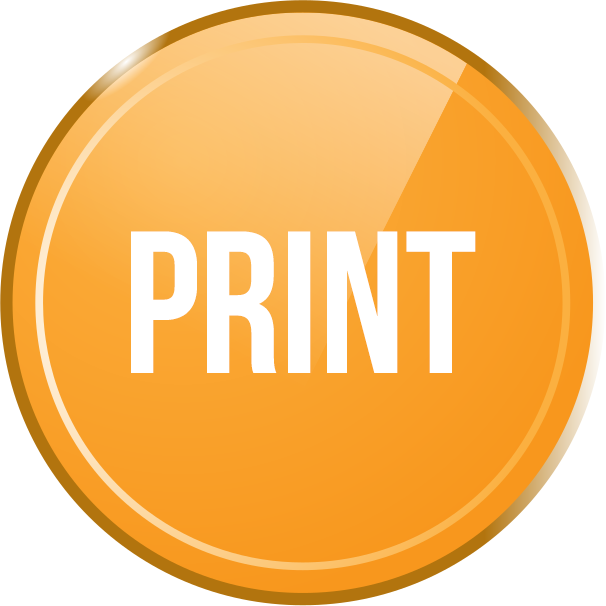
<style>
.page{position:relative;width:606px;height:606px;background:#ffffff}
.page>*{position:absolute;margin:0}
.t1{font:202px "BebasNeue";color:#ffffff}
</style>
<div class="page">
<p class="t1" style="left:131px;top:231px;width:345px;height:142px">PRINT</p>
</div>
